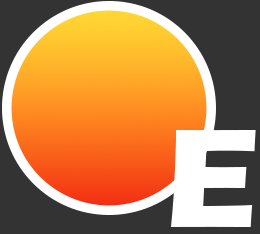
<style>
.page{position:relative;width:260px;height:234px;background:#333333}
.page>*{position:absolute;margin:0}
.t1{font:146.3px "ErasITC-Bold";color:#ffffff}
</style>
<div class="page">
<p class="t1" style="left:171px;top:130px;width:85px;height:97px">E</p>
</div>
